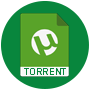
<style>
.page{position:relative;width:90px;height:90px;background:#08863d}
.page>*{position:absolute;margin:0}
.t1{font:9px "Arial-BoldMT";color:#08863d}
</style>
<div class="page">
<p class="t1" style="left:24px;top:68px;width:42px;height:7px">TORRENT</p>
</div>
